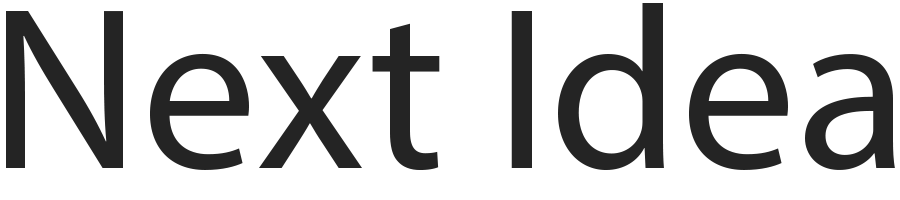
<style>
.page{position:relative;width:900px;height:200px;background:#ffffff}
.page>*{position:absolute;margin:0}
.t1{font:232.3px "MyriadPro-Regular";color:#242424}
</style>
<div class="page">
<p class="t1" style="left:6px;top:3px;width:889px;height:167px">Next Idea</p>
</div>
